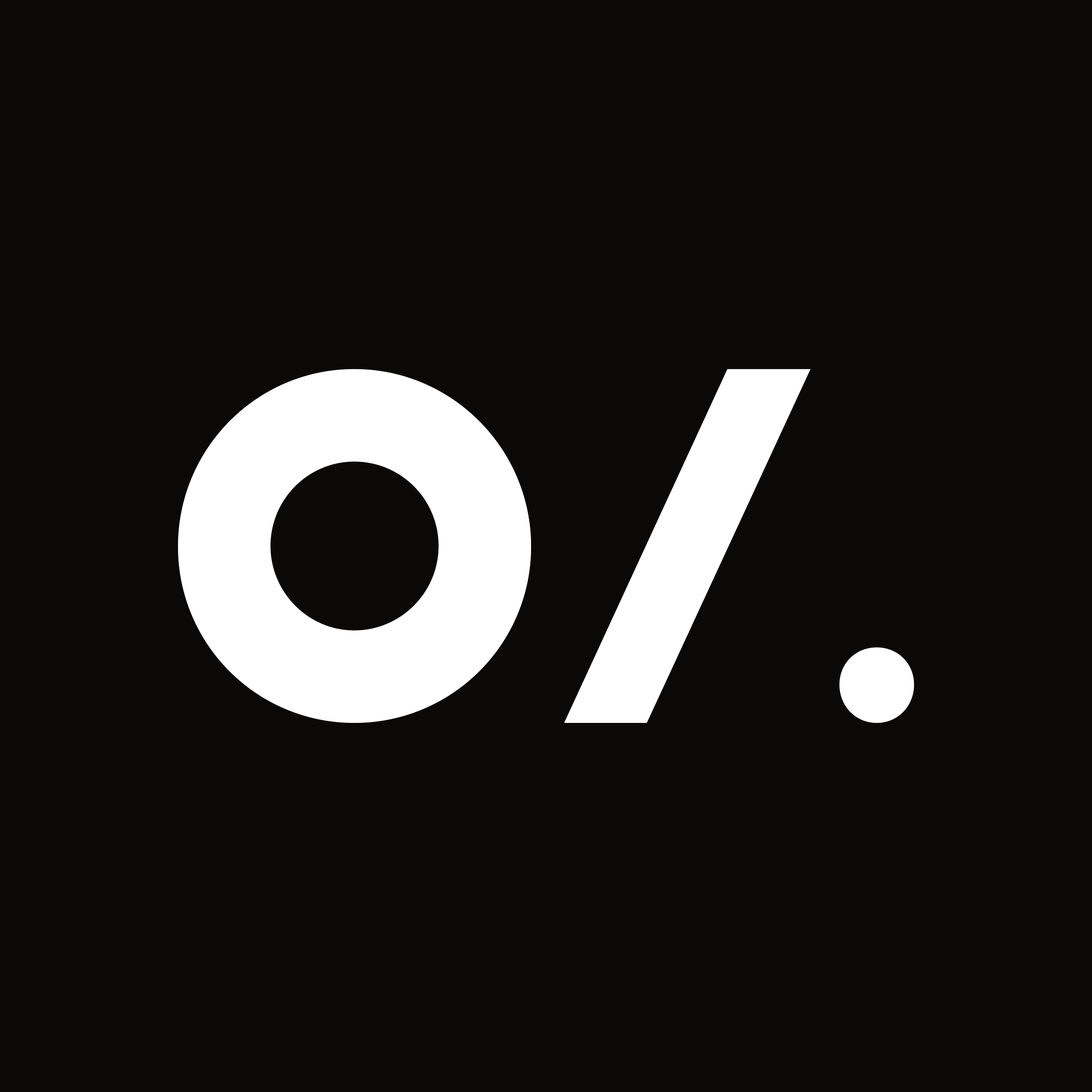
<style>
.page{position:relative;width:1092px;height:1092px;background:#0a0908}
.page>*{position:absolute;margin:0}
.t1{font:471.7px "BigJohnPRO-Bold";color:#ffffff}
</style>
<div class="page">
<p class="t1" style="left:178px;top:369px;width:736px;height:354px">O/.</p>
</div>
